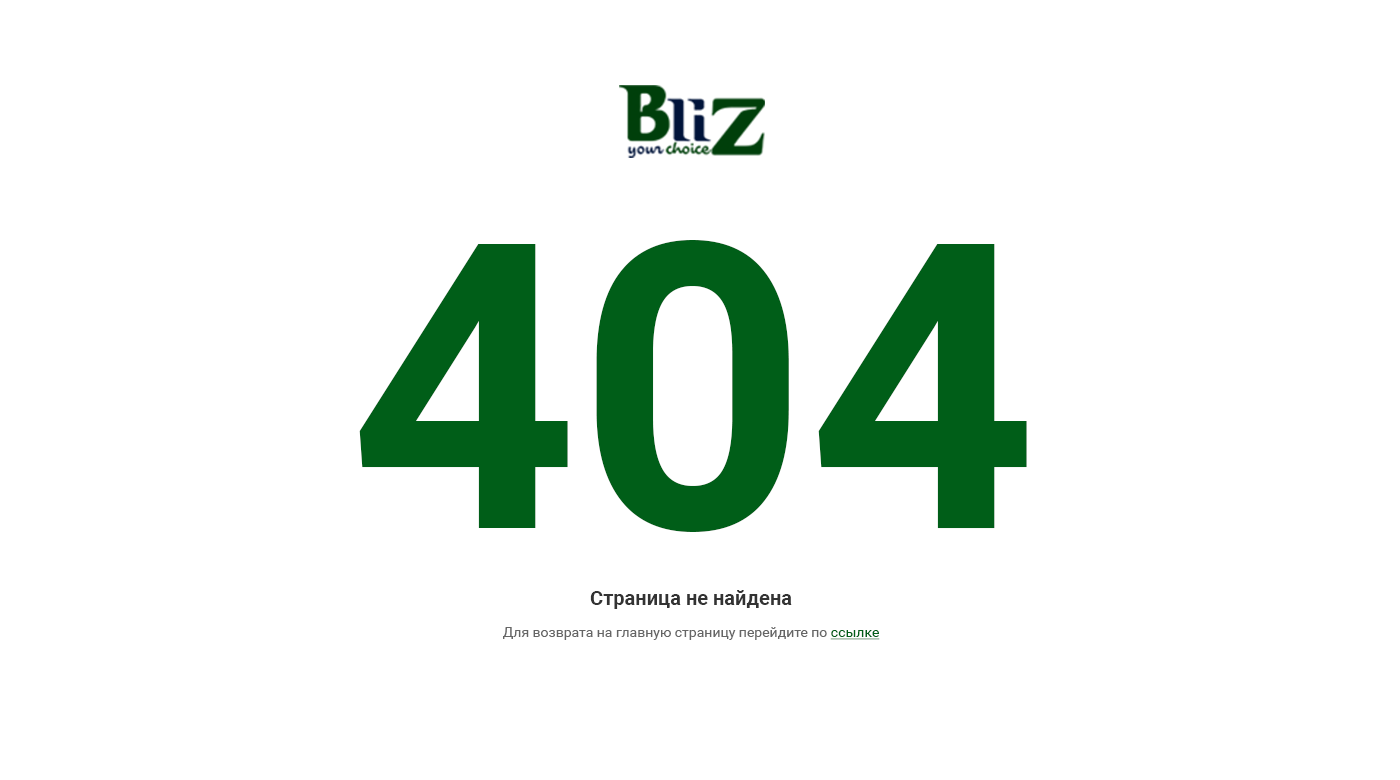
<style>
.page{position:relative;width:1400px;height:780px;background:#ffffff}
.page>*{position:absolute;margin:0}
.t1{font:400px "Roboto-Bold";color:#005e18}
.t2{font:14px/22px "Roboto-Regular";color:#666666}
.t3{font:20px/22px "Roboto-Bold";color:#333333}
.t4{font:14px/22px "Roboto-Regular";color:#005e18;text-decoration:underline}
</style>
<div class="page">
<p class="t1" style="left:359px;top:240px;width:668px;height:292px">404</p>
<p class="t2" style="left:503px;top:590px;width:377px;height:50px;text-align:center"><span class="t3">Страница не найдена<br></span>Для возврата на главную страницу перейдите по <span class="t4">ссылке</span></p>
</div>
